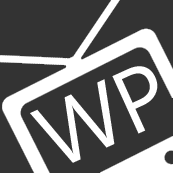
<style>
.page{position:relative;width:173px;height:173px;background:#333333}
.page>*{position:absolute;margin:0}
.t1{font:90px "SegoeUI";color:#ffffff}
</style>
<div class="page">
<p class="t1" style="left:30px;top:66px;width:128px;height:97px;rotate:-24deg">WP</p>
</div>
